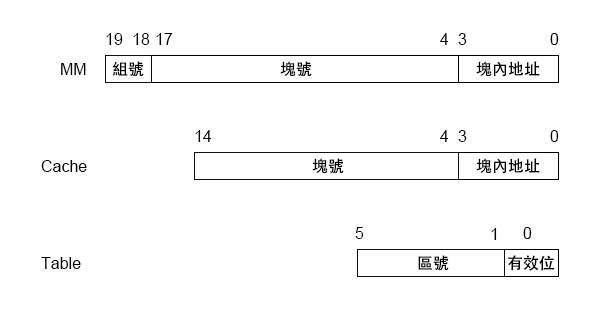
<style>
.page{position:relative;width:600px;height:310px;background:#ffffff}
.page>*{position:absolute;margin:0}
.t1{font:12px "ArialMT";color:#000000}
.t2{font:12px "AdobeHeitiStd-Regular";color:#000000}
</style>
<div class="page">
<p class="t1" style="left:106px;top:33px;width:17px;height:12px">19</p>
<p class="t1" style="left:133px;top:33px;width:17px;height:12px">18</p>
<p class="t1" style="left:156px;top:33px;width:17px;height:12px">17</p>
<p class="t1" style="left:440px;top:33px;width:9px;height:12px">4</p>
<p class="t1" style="left:458px;top:33px;width:9px;height:12px">3</p>
<p class="t1" style="left:550px;top:33px;width:9px;height:12px">0</p>
<p class="t1" style="left:61px;top:63px;width:25px;height:12px">MM</p>
<p class="t2" style="left:112px;top:61px;width:32px;height:16px">組號</p>
<p class="t2" style="left:280px;top:61px;width:32px;height:16px">塊號</p>
<p class="t2" style="left:476px;top:61px;width:64px;height:16px">塊內地址</p>
<p class="t1" style="left:195px;top:130px;width:17px;height:12px">14</p>
<p class="t1" style="left:440px;top:130px;width:9px;height:12px">4</p>
<p class="t1" style="left:458px;top:130px;width:9px;height:12px">3</p>
<p class="t1" style="left:550px;top:130px;width:9px;height:12px">0</p>
<p class="t1" style="left:41px;top:160px;width:46px;height:12px">Cache</p>
<p class="t2" style="left:312px;top:158px;width:32px;height:16px">塊號</p>
<p class="t2" style="left:476px;top:158px;width:64px;height:16px">塊內地址</p>
<p class="t1" style="left:355px;top:227px;width:9px;height:12px">5</p>
<p class="t1" style="left:491px;top:228px;width:6px;height:12px">1</p>
<p class="t1" style="left:523px;top:227px;width:9px;height:12px">0</p>
<p class="t1" style="left:41px;top:257px;width:40px;height:12px">Table</p>
<p class="t2" style="left:418px;top:255px;width:31px;height:16px">區號</p>
<p class="t2" style="left:508px;top:255px;width:47px;height:16px">有效位</p>
</div>
